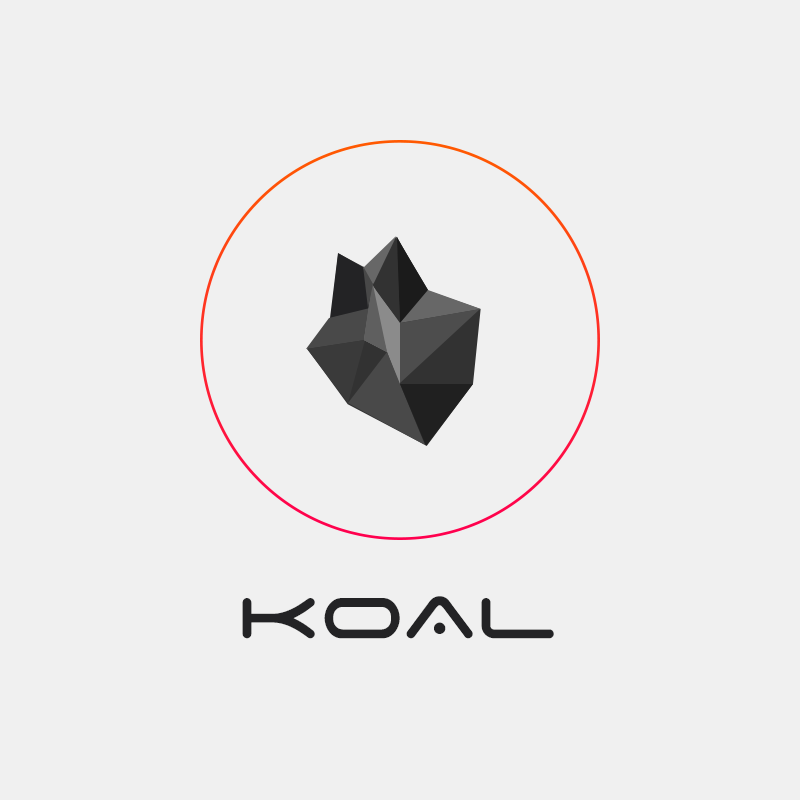
<style>
.page{position:relative;width:800px;height:800px;background:#f0f0f0}
.page>*{position:absolute;margin:0}
.t1{font:92.4px "SpaceAge";color:#232325}
</style>
<div class="page">
<p class="t1" style="left:242px;top:596px;width:312px;height:43px">KOAL</p>
</div>
